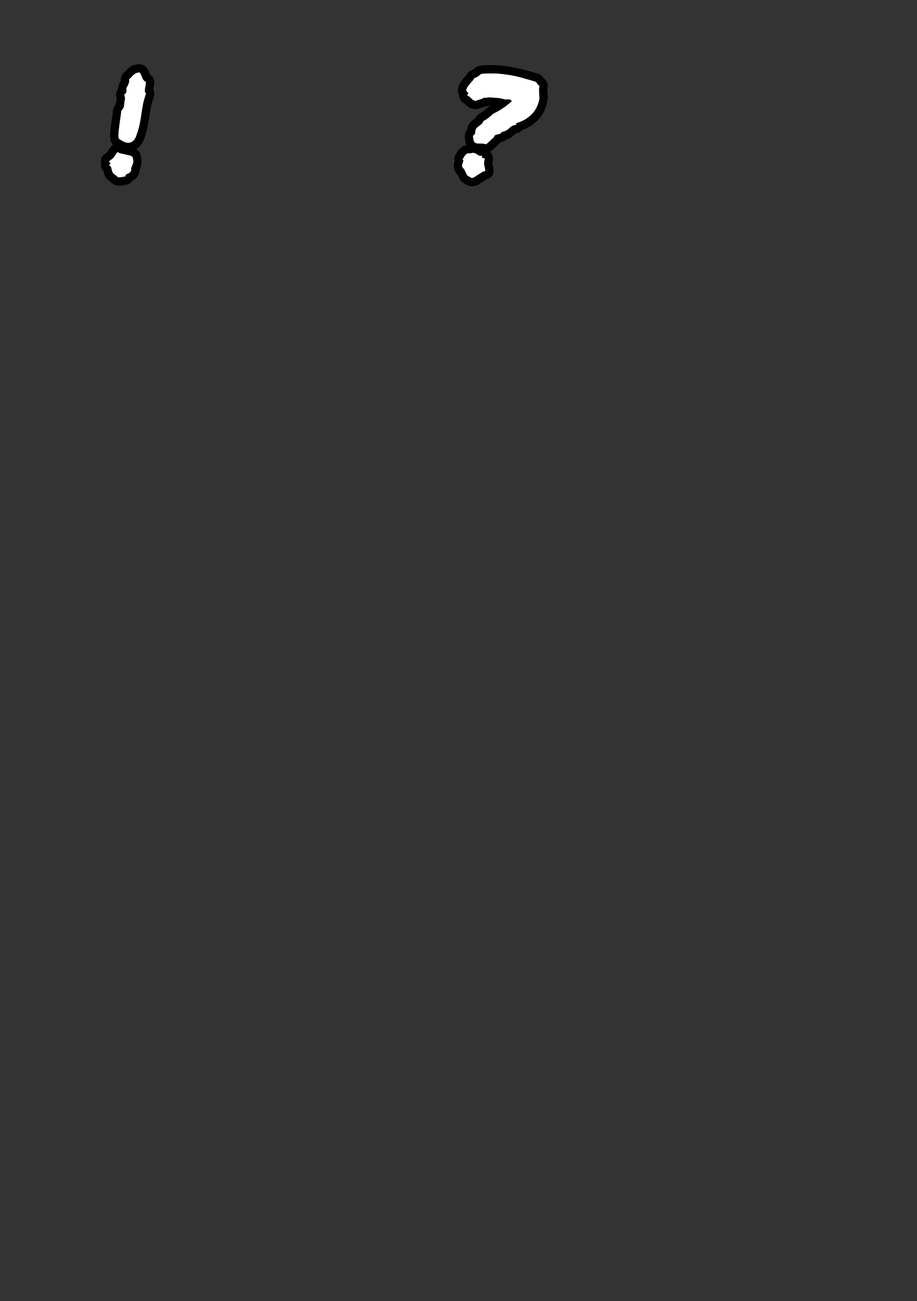
<style>
.page{position:relative;width:917px;height:1301px;background:#333333}
.page>*{position:absolute;margin:0}
.t1{font:136.6px "PermanentMarker-Regular";letter-spacing:-0.04em;color:#ffffff}
</style>
<div class="page">
<p class="t1" style="left:109px;top:72px;width:431px;height:106px">!       ?</p>
</div>
